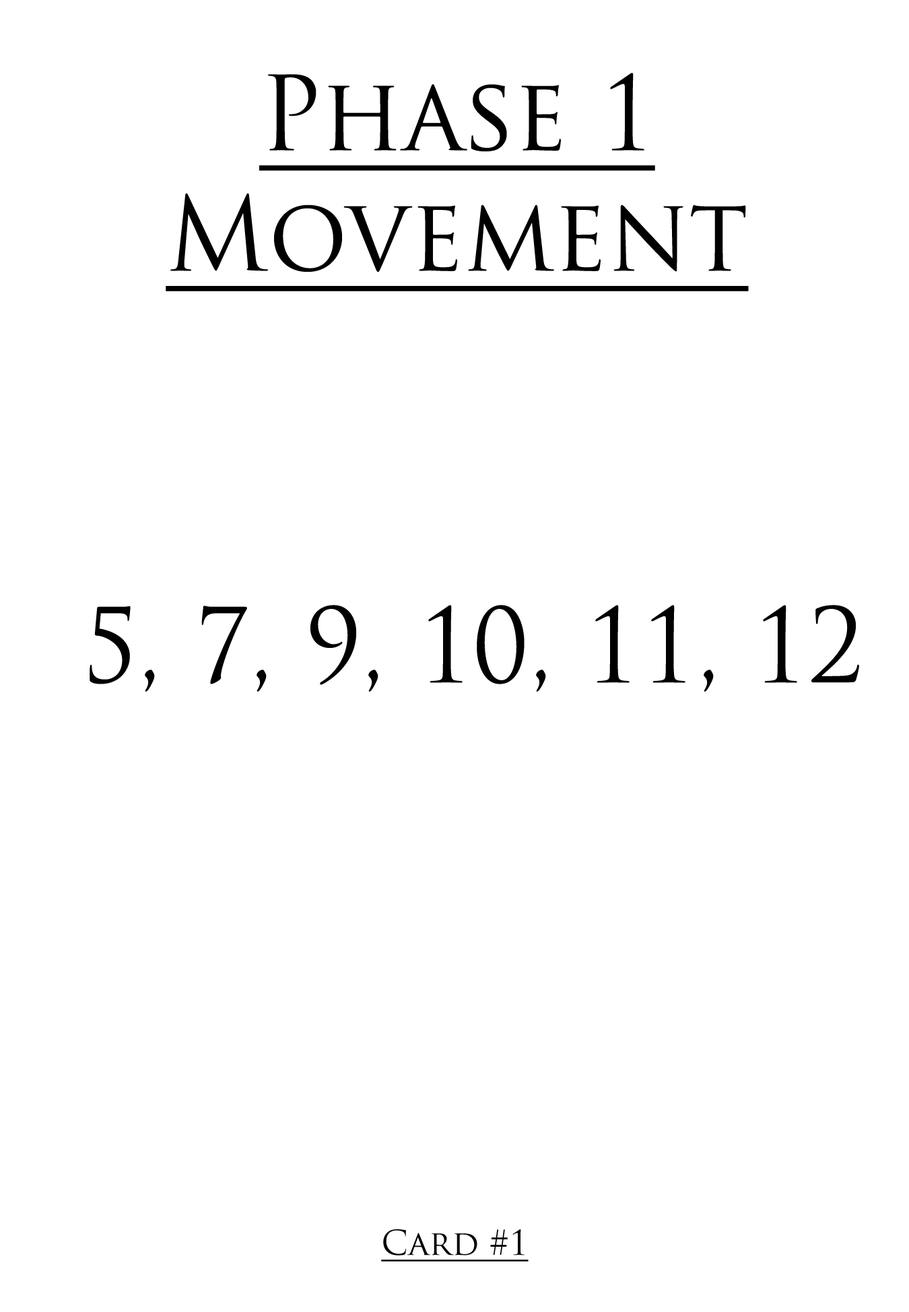
<style>
.page{position:relative;width:909px;height:1312px;background:#ffffff}
.page>*{position:absolute;margin:0}
.t1{font:100.6px "TrajanPro-Regular";color:#000000;text-decoration:underline;scale:0.97 1}
.t2{font:100.6px "TrajanPro-Regular";color:#000000;scale:0.97 1}
.t3{font:33.5px "TrajanPro-Regular";color:#000000;text-decoration:underline}
</style>
<div class="page">
<p class="t1" style="left:166px;top:73px;width:582px;height:218px;text-align:center">Phase 1<br>Movement</p>
<p class="t2" style="left:90px;top:605px;width:769px;height:87px">5, 7, 9, 10, 11, 12</p>
<p class="t3" style="left:381px;top:1230px;width:147px;height:32px">Card #1</p>
</div>
